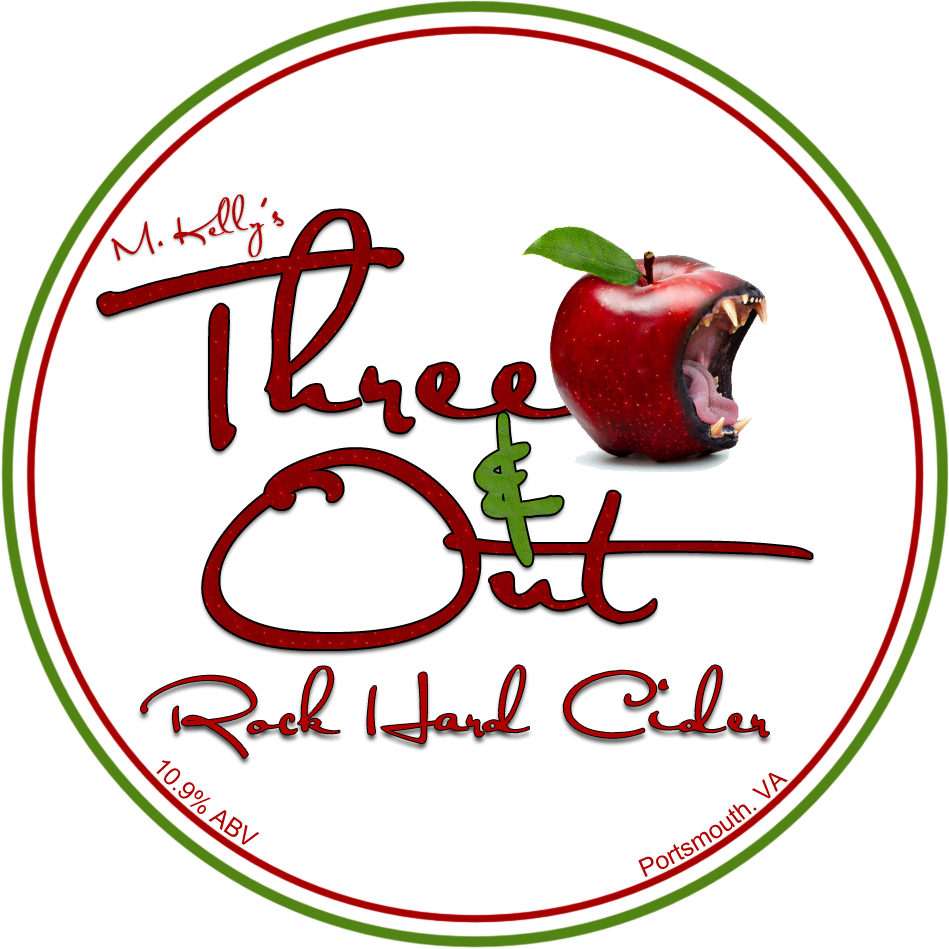
<style>
.page{position:relative;width:949px;height:949px;background:#ffffff}
.page>*{position:absolute;margin:0}
.t1{font:33.3px "Satisfaction";color:#b20000}
.t2{font:33.3px "Satisfaction";letter-spacing:-0.32em;color:#b20000}
.t3{font:33.3px "Satisfaction";letter-spacing:-0.04em;color:#b20000}
.t4{font:33.3px "Satisfaction";letter-spacing:-0.12em;color:#b20000}
.t5{font:200px "Satisfaction";color:#880102}
.t6{font:200px "Satisfaction";letter-spacing:-0.42em;color:#880102}
.t7{font:200px "Satisfaction";color:#528415}
.t8{font:66.7px "Satisfaction";color:#b20000}
.t9{font:25px "ArialMT";color:#b20000}
</style>
<div class="page">
<p class="t1" style="left:111px;top:194px;width:173px;height:67px;rotate:-11deg">M<span class="t2">.</span> Kell<span class="t3">y</span><span class="t4">’</span>s</p>
<p class="t5" style="left:98px;top:210px;width:488px;height:240px"><span class="t6">T</span>hree</p>
<p class="t7" style="left:475px;top:413px;width:88px;height:153px">&amp;</p>
<p class="t5" style="left:203px;top:449px;width:609px;height:200px">Out</p>
<p class="t8" style="left:141px;top:665px;width:628px;height:93px">Rock Hard Cider</p>
<p class="t9" style="left:156px;top:760px;width:632px;height:117px">10.9% ABV                                                           Portsmouth. VA</p>
</div>
